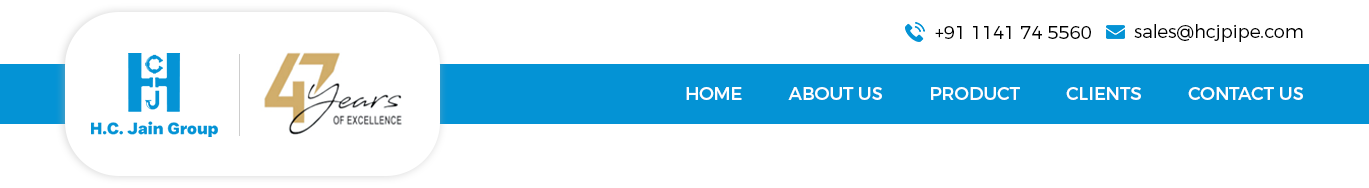
<style>
.page{position:relative;width:1369px;height:188px;background:#ffffff}
.page>*{position:absolute;margin:0}
.t1{font:18px "Montserrat-Light";color:#000000}
.t2{font:18px "Montserrat-Regular";color:#ffffff}
</style>
<div class="page">
<p class="t1" style="left:935px;top:26px;width:156px;height:13px">+91 1141 74 5560</p>
<p class="t1" style="left:1134px;top:24px;width:169px;height:18px">sales@hcjpipe.com</p>
<p class="t2" style="left:686px;top:87px;width:617px;height:13px">HOME          ABOUT US          PRODUCT          CLIENTS          CONTACT US</p>
</div>
